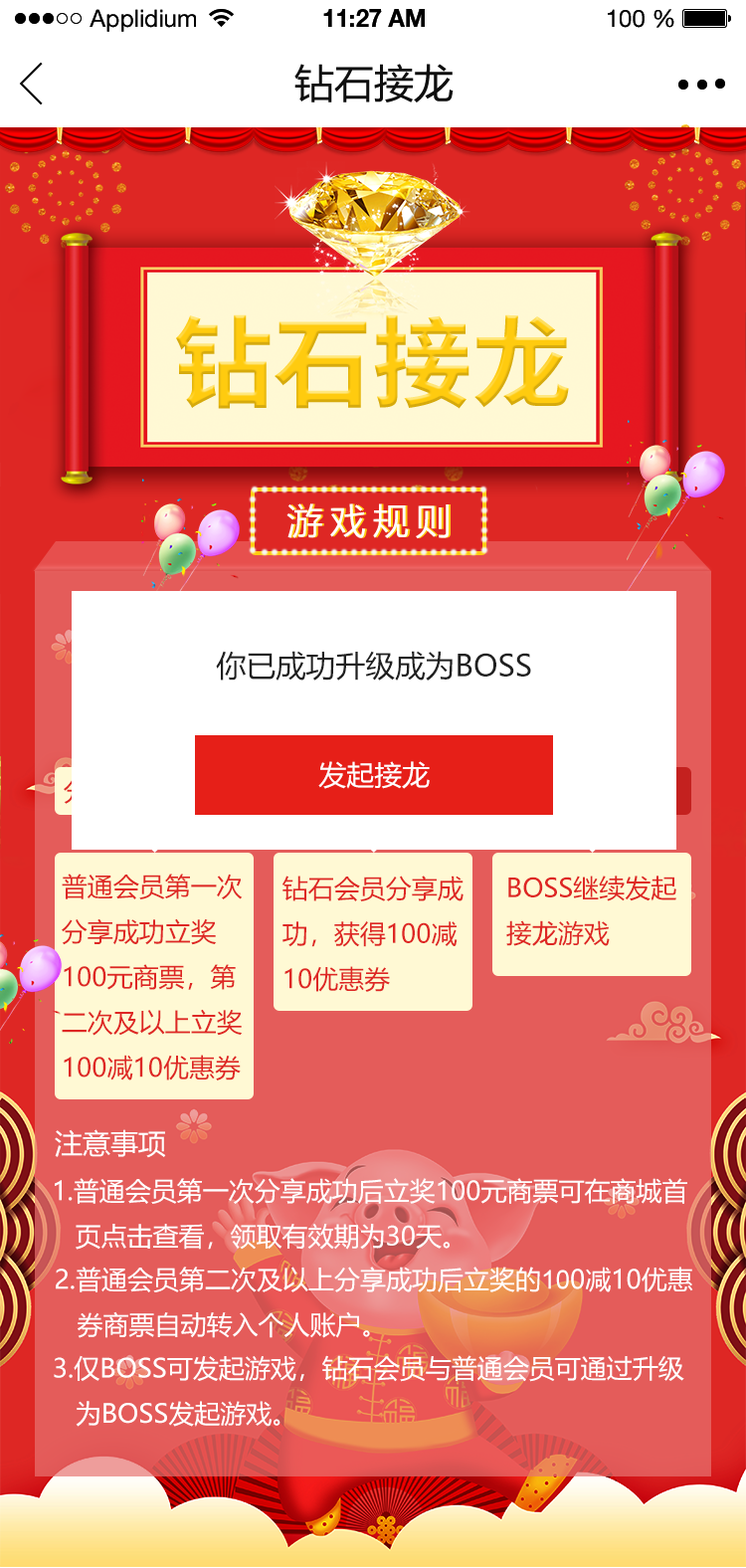
<style>
.page{position:relative;width:746px;height:1568px}
.page>*{position:absolute;margin:0}
.t1{font:23.9px "HelveticaNeueLTStd-Roman";color:#000000}
.t2{font:23.9px "HelveticaNeueLTStd-Bd";color:#000000}
.t3{font:39.8px "MicrosoftYaHei";color:#202020;text-transform:uppercase}
.t4{font:99.5px "SourceHanSansCN-Bold";color:#ffcb0f}
.t5{font:29.8px "MicrosoftYaHei";color:#202020;text-transform:uppercase}
.t6{font:27.9px "MicrosoftYaHei";color:#ffffff;text-transform:uppercase}
.t7{font:25.9px "MicrosoftYaHei";color:#de2724;text-transform:uppercase}
.t8{font:25.9px "MicrosoftYaHei";color:#ffffff;text-transform:uppercase}
.t9{font:25.9px "ArialMT";color:#ffffff;text-transform:uppercase}
</style>
<div class="page">
<p class="t1" style="left:90px;top:9px;width:106px;height:23px">Applidium</p>
<p class="t2" style="left:323px;top:9px;width:102px;height:18px">11:27 AM</p>
<p class="t1" style="left:608px;top:9px;width:67px;height:19px">100 %</p>
<p class="t3" style="left:294px;top:64px;width:160px;height:38px">钻石接龙</p>
<p class="t4" style="left:176px;top:314px;width:393px;height:95px">钻石接龙</p>
<p class="t5" style="left:216px;top:651px;width:315px;height:30px">你已成功升级成为boss</p>
<p class="t6" style="left:318px;top:761px;width:112px;height:28px">发起接龙</p>
<p class="t7" style="left:62px;top:874px;width:181px;height:206px">普通会员第一次<br>分享成功立奖<br>100元商票，第<br>二次及以上立奖<br>100减10优惠券</p>
<p class="t7" style="left:283px;top:876px;width:181px;height:116px">钻石会员分享成<br>功，获得100减<br>10优惠券</p>
<p class="t7" style="left:506px;top:876px;width:171px;height:70px">boss继续发起<br>接龙游戏</p>
<p class="t6" style="left:55px;top:1129px;width:111px;height:29px">注意事项</p>
<p class="t8" style="left:55px;top:1178px;width:632px;height:72px">1.普通会员第一次分享成功后立奖100元商票可在商城首<br>   页点击查看，领取有效期为30天。</p>
<p class="t8" style="left:56px;top:1267px;width:637px;height:71px">2.普通会员第二次及以上分享成功后立奖的<span class="t9">10</span>0减10优惠<br>   券商票自动转入个人账户。</p>
<p class="t8" style="left:54px;top:1355px;width:631px;height:72px">3.仅BOSS可发起游戏，钻石会员与普通会员可通过升级<br>   为BOSS发起游戏。</p>
</div>
